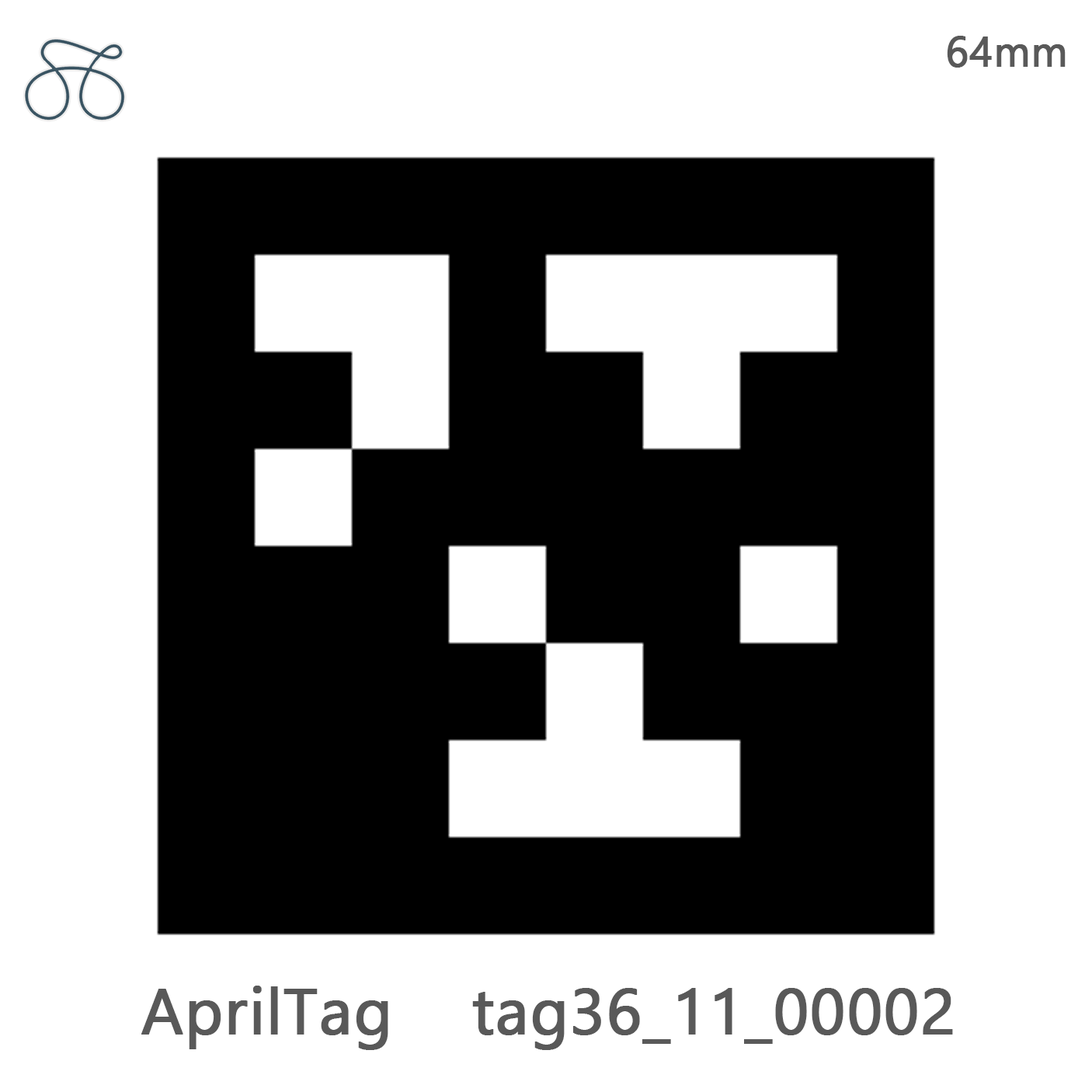
<style>
.page{position:relative;width:1092px;height:1092px;background:#ffffff}
.page>*{position:absolute;margin:0}
.t1{font:42.1px "Gadugi";color:#595959;font-weight:bold}
.t2{font:64.7px "Gadugi";color:#595959;font-weight:bold}
</style>
<div class="page">
<p class="t1" style="left:947px;top:36px;width:119px;height:32px">64mm</p>
<p class="t2" style="left:141px;top:986px;width:812px;height:64px">AprilTag    tag36_11_00002</p>
</div>
